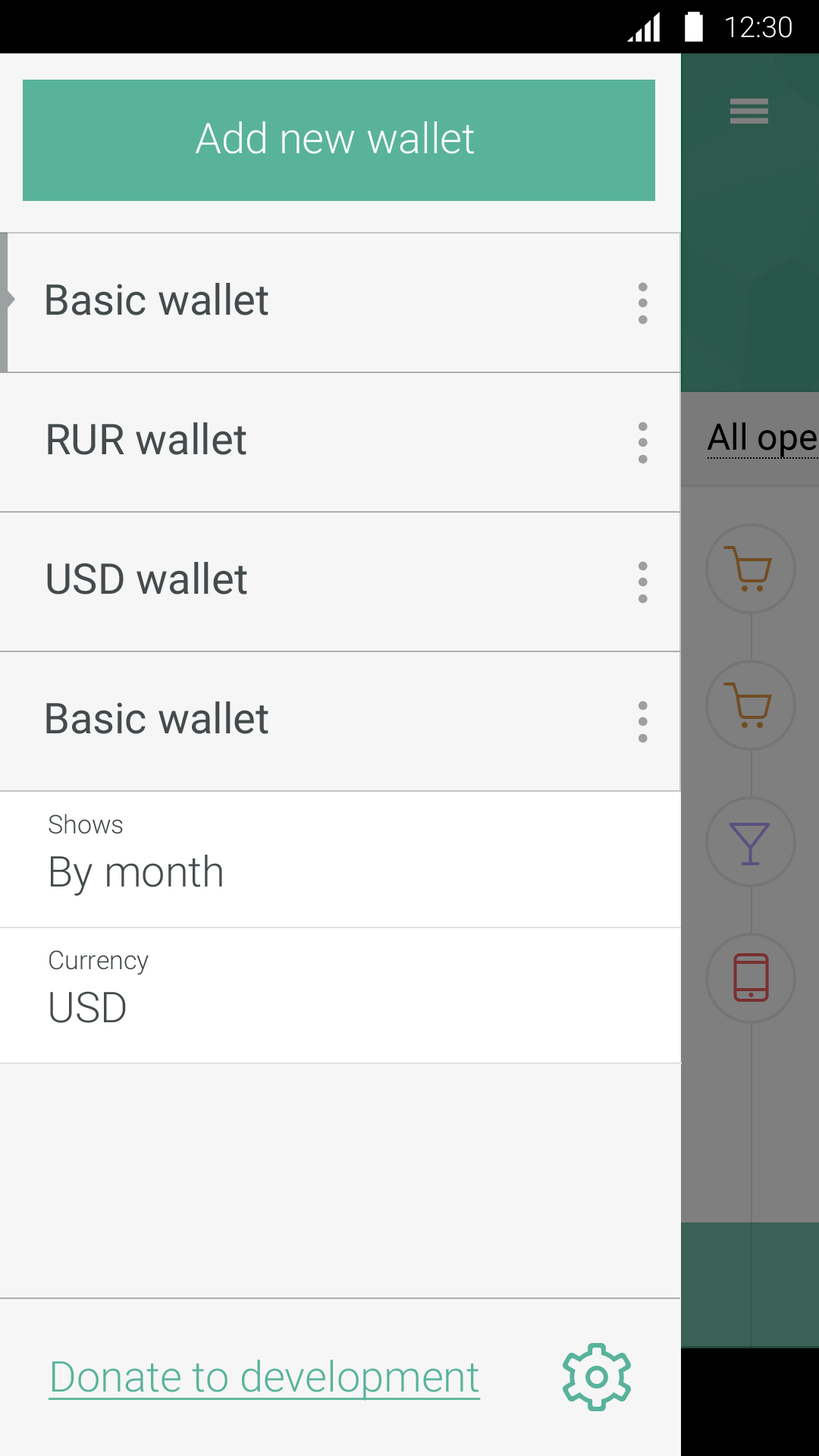
<style>
.page{position:relative;width:819px;height:1456px;background:#f6f6f6}
.page>*{position:absolute;margin:0}
.t1{font:28.8px "Roboto-Light";color:#ffffff}
.t2{font:42.5px "Roboto-Light";color:#ffffff}
.t3{font:42.5px "Roboto-Regular";color:#454b4d}
.t4{font:25.8px "Roboto-Light";color:#454b4d}
.t5{font:42.5px "Roboto-Light";color:#454b4d}
.t6{font:42.5px "Roboto-Light";color:#59b39a;text-decoration:underline}
</style>
<div class="page">
<p class="t1" style="left:726px;top:16px;width:66px;height:22px">12:30</p>
<p class="t2" style="left:195px;top:121px;width:279px;height:33px">Add new wallet</p>
<p class="t3" style="left:46px;top:283px;width:222px;height:32px">Basic wallet</p>
<p class="t3" style="left:48px;top:422px;width:198px;height:33px">RUR wallet</p>
<p class="t3" style="left:47px;top:562px;width:200px;height:33px">USD wallet</p>
<p class="t3" style="left:46px;top:701px;width:222px;height:33px">Basic wallet</p>
<p class="t4" style="left:49px;top:814px;width:74px;height:20px">Shows</p>
<p class="t5" style="left:51px;top:855px;width:171px;height:41px">By month</p>
<p class="t4" style="left:49px;top:950px;width:100px;height:25px">Currency</p>
<p class="t5" style="left:50px;top:991px;width:76px;height:32px">USD</p>
<p class="t6" style="left:49px;top:1360px;width:432px;height:41px">Donate to development</p>
</div>
